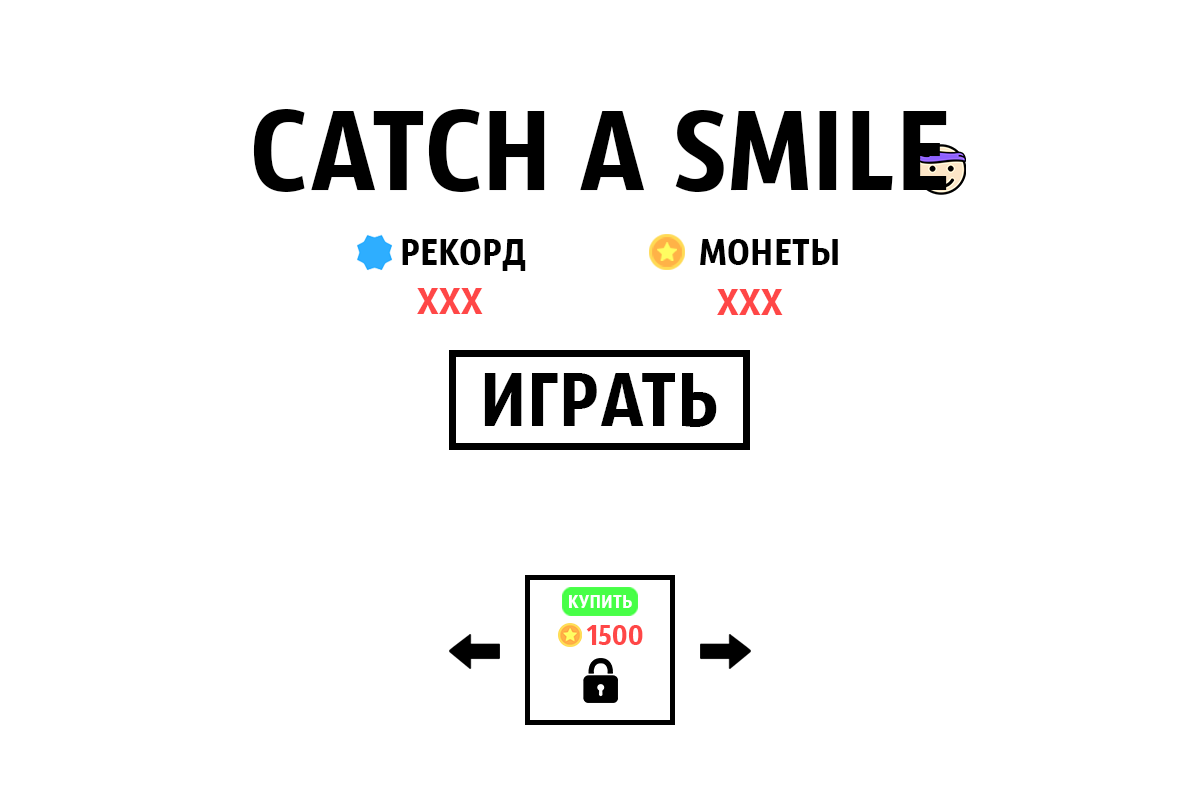
<style>
.page{position:relative;width:1200px;height:800px;background:#ffffff}
.page>*{position:absolute;margin:0}
.t1{font:120px "SansusWebissimo";letter-spacing:0.01em;color:#000000}
.t2{font:40px "SansusWebissimo";letter-spacing:0.01em;color:#000000}
.t3{font:40px "SansusWebissimo";letter-spacing:0.01em;color:#ff4747}
.t4{font:80px "SansusWebissimo";letter-spacing:0.01em;color:#000000}
.t5{font:20px "SansusWebissimo";letter-spacing:0.01em;color:#ffffff}
.t6{font:30px "SansusWebissimo";letter-spacing:0.01em;color:#ff4747}
</style>
<div class="page">
<p class="t1" style="left:253px;top:109px;width:694px;height:83px">CATCH A SMILE</p>
<p class="t2" style="left:402px;top:239px;width:124px;height:32px">РЕКОРД</p>
<p class="t2" style="left:700px;top:239px;width:138px;height:26px">МОНЕТЫ</p>
<p class="t3" style="left:417px;top:288px;width:66px;height:26px">XXX</p>
<p class="t3" style="left:717px;top:289px;width:66px;height:26px">XXX</p>
<p class="t4" style="left:484px;top:373px;width:233px;height:54px">ИГРАТЬ</p>
<p class="t5" style="left:569px;top:595px;width:63px;height:13px">КУПИТЬ</p>
<p class="t6" style="left:586px;top:625px;width:57px;height:20px">1500</p>
</div>
